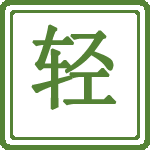
<style>
.page{position:relative;width:150px;height:150px;background:#ffffff}
.page>*{position:absolute;margin:0}
.t1{font:90px "SimSun";color:#548235;font-weight:bold}
</style>
<div class="page">
<p class="t1" style="left:31px;top:24px;width:86px;height:86px">轻</p>
</div>
